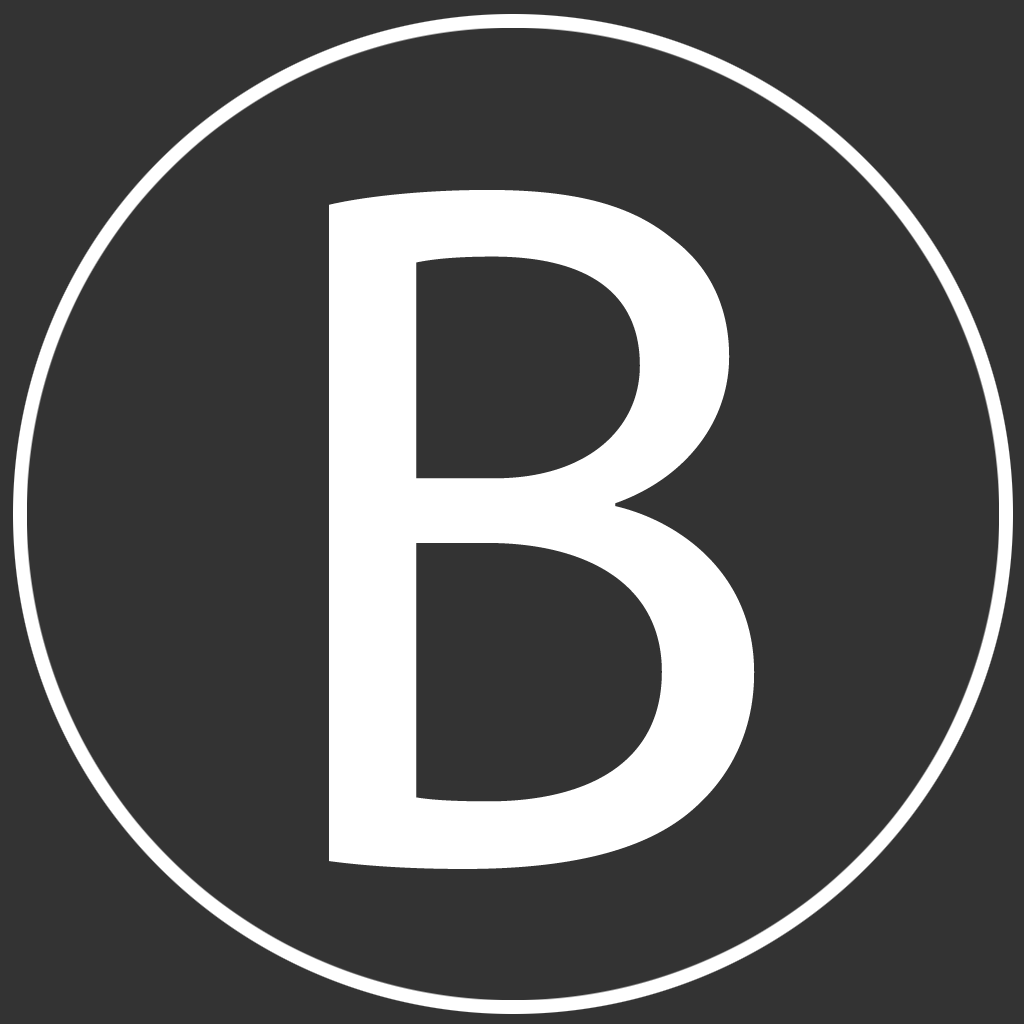
<style>
.page{position:relative;width:1024px;height:1024px;background:#333333}
.page>*{position:absolute;margin:0}
.t1{font:990.9px "MyriadPro-Regular";color:#ffffff}
</style>
<div class="page">
<p class="t1" style="left:329px;top:190px;width:426px;height:679px">B</p>
</div>
